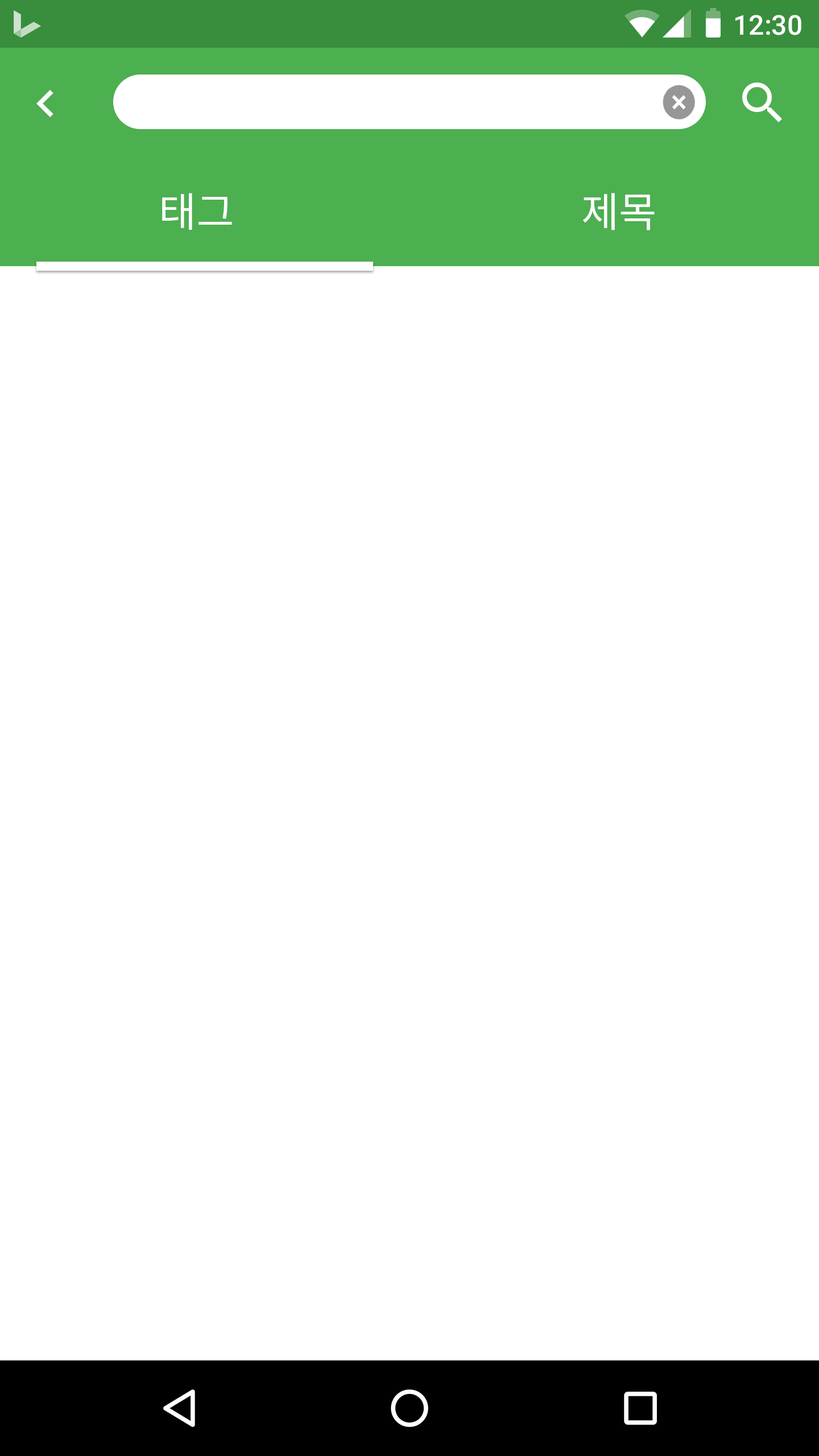
<style>
.page{position:relative;width:819px;height:1456px;background:#ffffff}
.page>*{position:absolute;margin:0}
.t1{font:27.3px "Roboto-Medium";color:#ffffff}
.t2{font:40.9px "NotoSansCJKkr-Regular";color:#ffffff}
</style>
<div class="page">
<p class="t1" style="left:735px;top:15px;width:66px;height:20px">12:30</p>
<p class="t2" style="left:162px;top:193px;width:70px;height:37px">태그</p>
<p class="t2" style="left:583px;top:193px;width:72px;height:37px">제목</p>
</div>
